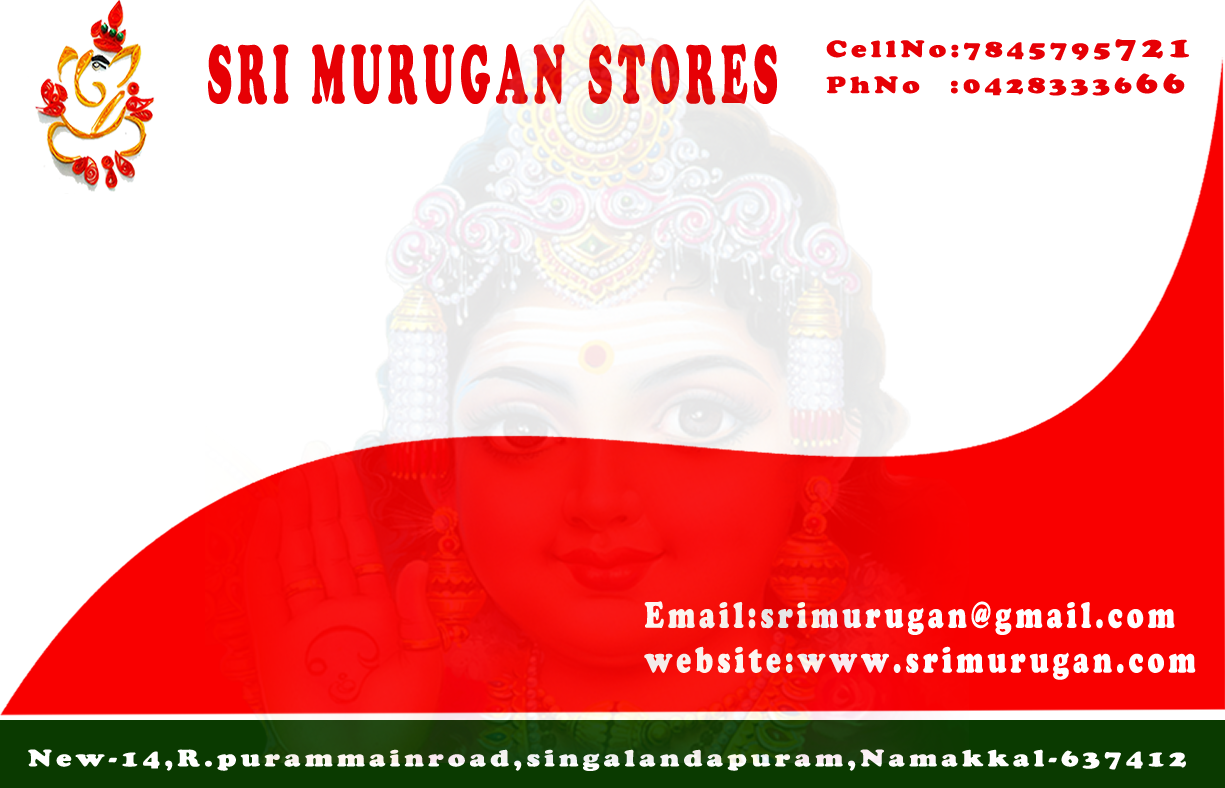
<style>
.page{position:relative;width:1225px;height:788px;background:#ffffff}
.page>*{position:absolute;margin:0}
.t1{font:23.3px "CooperBlackStd";letter-spacing:0.16em;color:#e60005;scale:1.18 1}
.t2{font:29.1px "CooperBlackStd";letter-spacing:0.16em;color:#e60005;scale:1.18 1}
.t3{font:81.8px "CooperBlackStd";letter-spacing:0.16em;color:#e60005;scale:0.44 1}
.t4{font:36.2px "CooperBlackStd";letter-spacing:0.16em;color:#fffefe;scale:0.73 1}
.t5{font:23.3px "CooperBlackStd";letter-spacing:0.16em;color:#fffefe;scale:1.18 1}
</style>
<div class="page">
<p class="t1" style="left:826px;top:39px;width:363px;height:57px">CellNo:7845795<span class="t2">721<br></span>PhNo  :04283336<span class="t2">66</span></p>
<p class="t3" style="left:208px;top:43px;width:569px;height:62px">SRI MURUGAN STORES</p>
<p class="t4" style="left:644px;top:601px;width:552px;height:79px">Email:srimurugan@gmail.com <br>      website:www.srimurugan.com</p>
<p class="t5" style="left:28px;top:749px;width:1158px;height:22px"><span class="t1"><br> </span>New-14,R.purammainroad,singalandapuram,Namakkal-637412</p>
</div>
